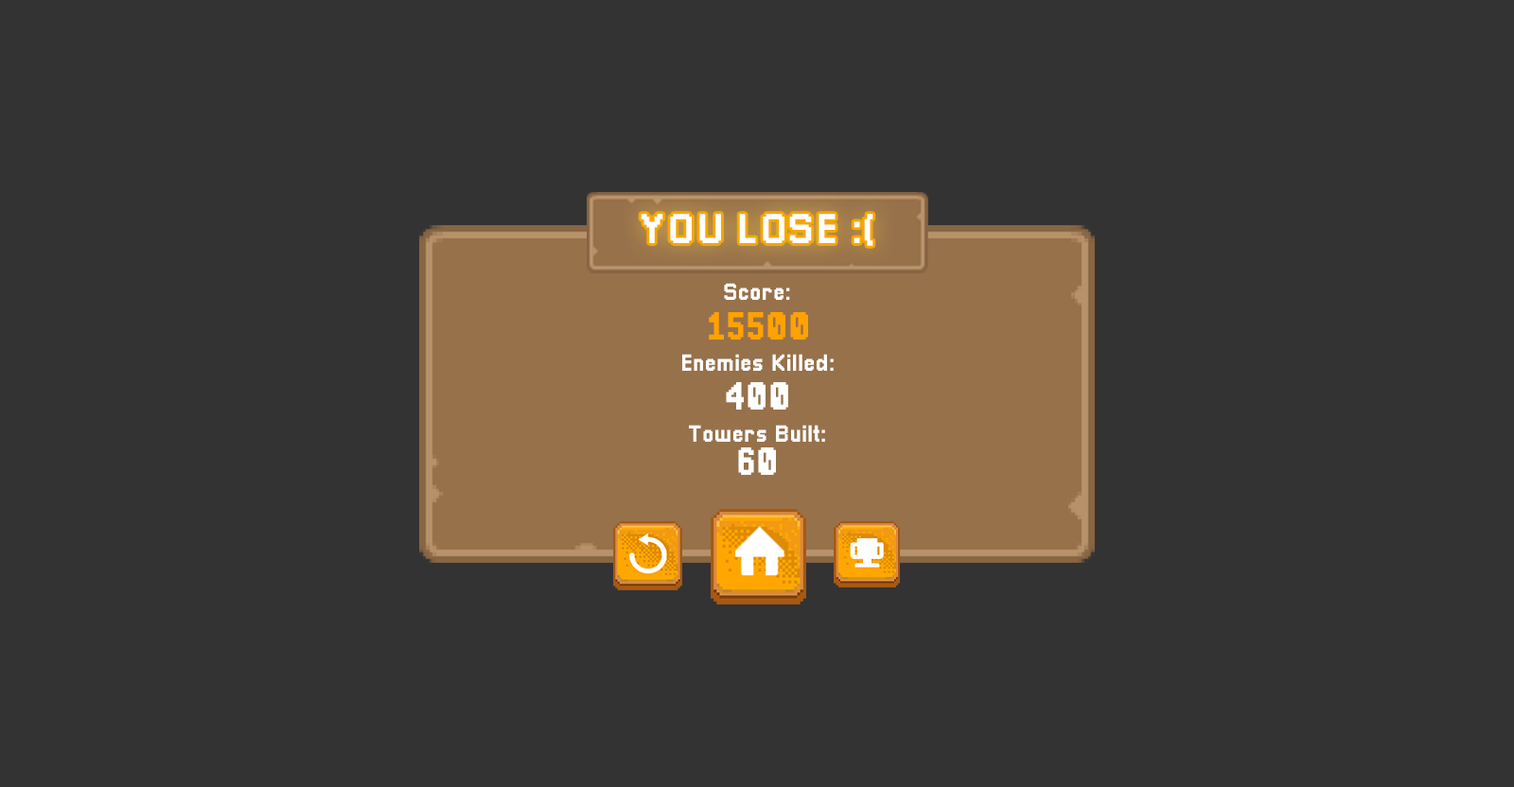
<style>
.page{position:relative;width:1514px;height:787px;background:#333333}
.page>*{position:absolute;margin:0}
.t1{font:42.5px "Pixellari";color:#ffffff}
.t2{font:23.7px "Pixellari";color:#ffffff}
.t3{font:39.8px "Pixellari";color:#ffa200}
.t4{font:39.8px "Pixellari";color:#ffffff}
</style>
<div class="page">
<p class="t1" style="left:641px;top:214px;width:233px;height:32px">YOU LOSE :(</p>
<p class="t2" style="left:724px;top:283px;width:66px;height:17px">Score:</p>
<p class="t3" style="left:709px;top:312px;width:99px;height:28px">15500</p>
<p class="t2" style="left:682px;top:354px;width:152px;height:17px">Enemies Killed:</p>
<p class="t4" style="left:726px;top:382px;width:62px;height:28px">400</p>
<p class="t2" style="left:689px;top:425px;width:136px;height:17px">Towers Built:</p>
<p class="t4" style="left:738px;top:448px;width:38px;height:27px">60</p>
</div>
